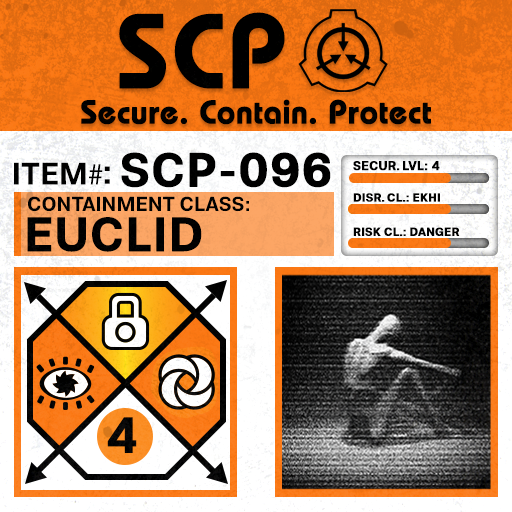
<style>
.page{position:relative;width:512px;height:512px}
.page>*{position:absolute;margin:0}
.t1{font:105.8px "BauhausLT-Demi";color:#000000;font-weight:bold}
.t2{font:33px "BauhausLT-Demi";color:#000000;font-weight:bold}
.t3{font:47.6px "Molde-Semibold";color:#000000;font-weight:bold}
.t4{font:12.5px "Molde-Semibold";color:#000000;font-weight:bold}
.t5{font:31.1px "Molde-Semibold";color:#000000}
.t6{font:31.1px "MyriadPro-Regular";color:#000000}
.t7{font:34.5px "Molde-Semibold";color:#000000}
.t8{font:20.3px "Molde-Semibold";color:#000000}
.t9{font:11.7px "Molde-Semibold";color:#000000;font-weight:bold}
.t10{font:47.8px "Molde-Semibold";color:#000000;font-weight:bold}
</style>
<div class="page">
<p class="t1" style="left:119px;top:12px;width:166px;height:77px">SCP</p>
<p class="t2" style="left:81px;top:99px;width:350px;height:26px">Secure. Contain. Protect</p>
<p class="t3" style="left:121px;top:152px;width:210px;height:36px">SCP-096</p>
<p class="t4" style="left:353px;top:161px;width:87px;height:10px">SECUR. LVL: 4</p>
<p class="t5" style="left:14px;top:162px;width:89px;height:23px">ITEM<span class="t6">#</span></p>
<p class="t7" style="left:104px;top:166px;width:6px;height:18px">:</p>
<p class="t8" style="left:28px;top:196px;width:221px;height:16px">CONTAINMENT CLASS:</p>
<p class="t9" style="left:353px;top:193px;width:87px;height:9px">DISR. CL.: EKHI</p>
<p class="t10" style="left:27px;top:217px;width:175px;height:35px">EUCLID</p>
<p class="t9" style="left:353px;top:227px;width:107px;height:9px">RISK CL.: DANGER</p>
</div>
